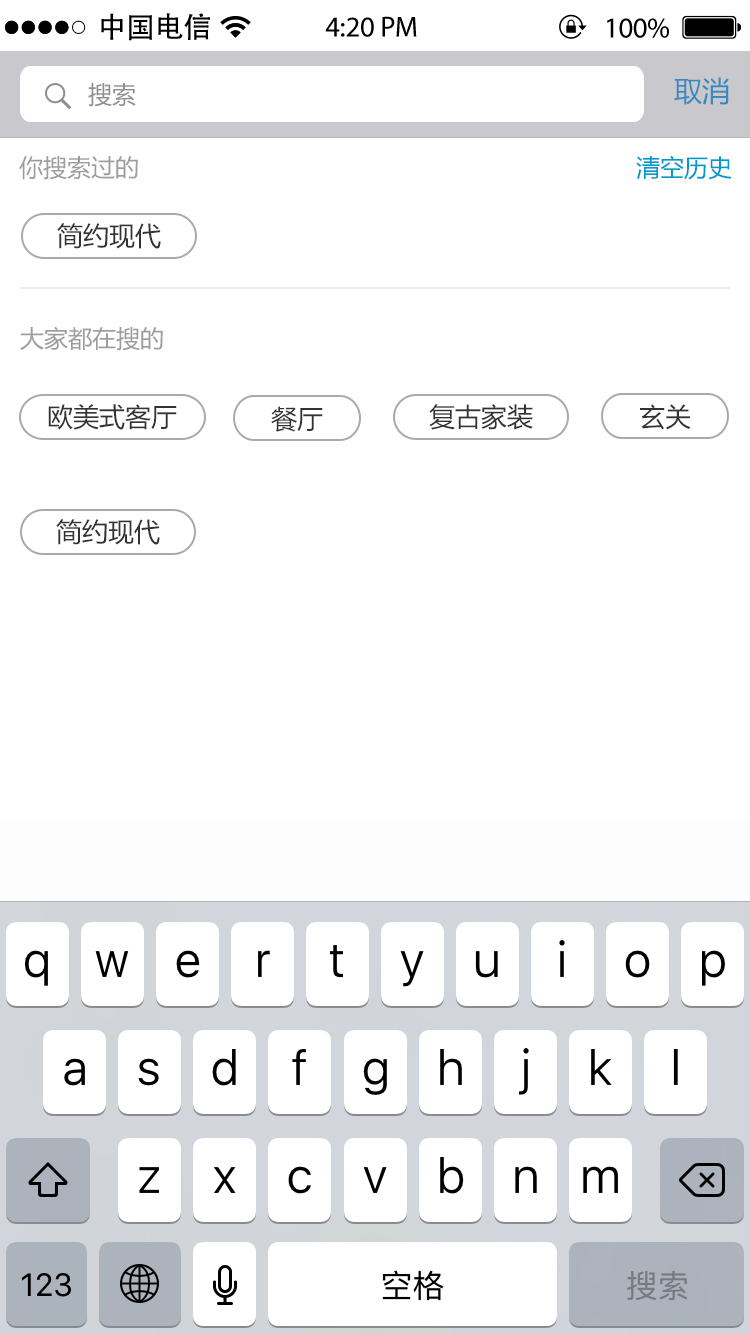
<style>
.page{position:relative;width:750px;height:1334px;background:#ffffff}
.page>*{position:absolute;margin:0}
.t1{font:28.8px "AdobeHeitiStd-Regular";color:#000000}
.t2{font:28.8px "MyriadPro-Regular";color:#000000}
.t3{font:28px "MicrosoftYaHei";color:#398abf}
.t4{font:24px "MicrosoftYaHei";color:#8e8e93}
.t5{font:24px "MicrosoftYaHei";color:#9d9d9d}
.t6{font:24px "MicrosoftYaHei";color:#0099cc}
.t7{font:26px "MicrosoftYaHei";color:#333333}
</style>
<div class="page">
<p class="t1" style="left:101px;top:13px;width:109px;height:28px">中国电信</p>
<p class="t2" style="left:325px;top:16px;width:92px;height:21px">4:20 PM</p>
<p class="t2" style="left:607px;top:18px;width:62px;height:20px">100%</p>
<p class="t3" style="left:674px;top:77px;width:55px;height:28px">取消</p>
<p class="t4" style="left:88px;top:83px;width:48px;height:24px">搜索</p>
<p class="t5" style="left:19px;top:155px;width:713px;height:25px">你搜索过的                                                                      <span class="t6">清空历史</span></p>
<p class="t7" style="left:57px;top:223px;width:104px;height:26px">简约现代</p>
<p class="t5" style="left:20px;top:326px;width:143px;height:25px">大家都在搜的</p>
<p class="t7" style="left:48px;top:404px;width:129px;height:26px">欧美式客厅</p>
<p class="t7" style="left:271px;top:406px;width:52px;height:26px">餐厅</p>
<p class="t7" style="left:429px;top:404px;width:104px;height:26px">复古家装</p>
<p class="t7" style="left:640px;top:404px;width:51px;height:26px">玄关</p>
<p class="t7" style="left:56px;top:519px;width:104px;height:26px">简约现代</p>
</div>
